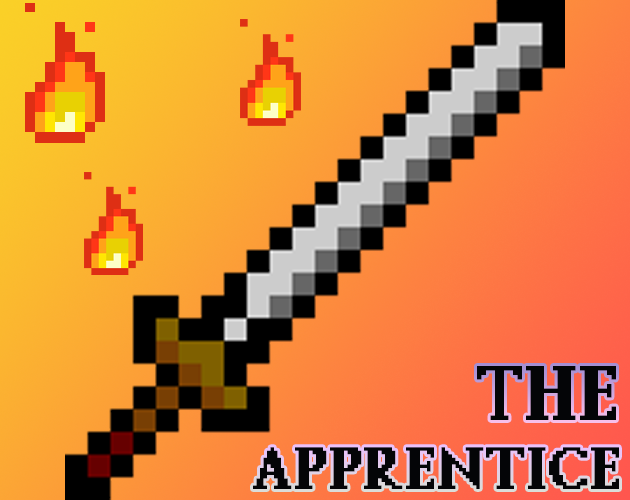
<style>
.page{position:relative;width:630px;height:500px}
.page>*{position:absolute;margin:0}
.t1{font:72px "Vastantonius";color:#040507}
.t2{font:55.7px "Vastantonius";color:#040507}
</style>
<div class="page">
<p class="t1" style="left:477px;top:366px;width:139px;height:54px">The</p>
<p class="t2" style="left:253px;top:447px;width:366px;height:42px">apprentice</p>
</div>
